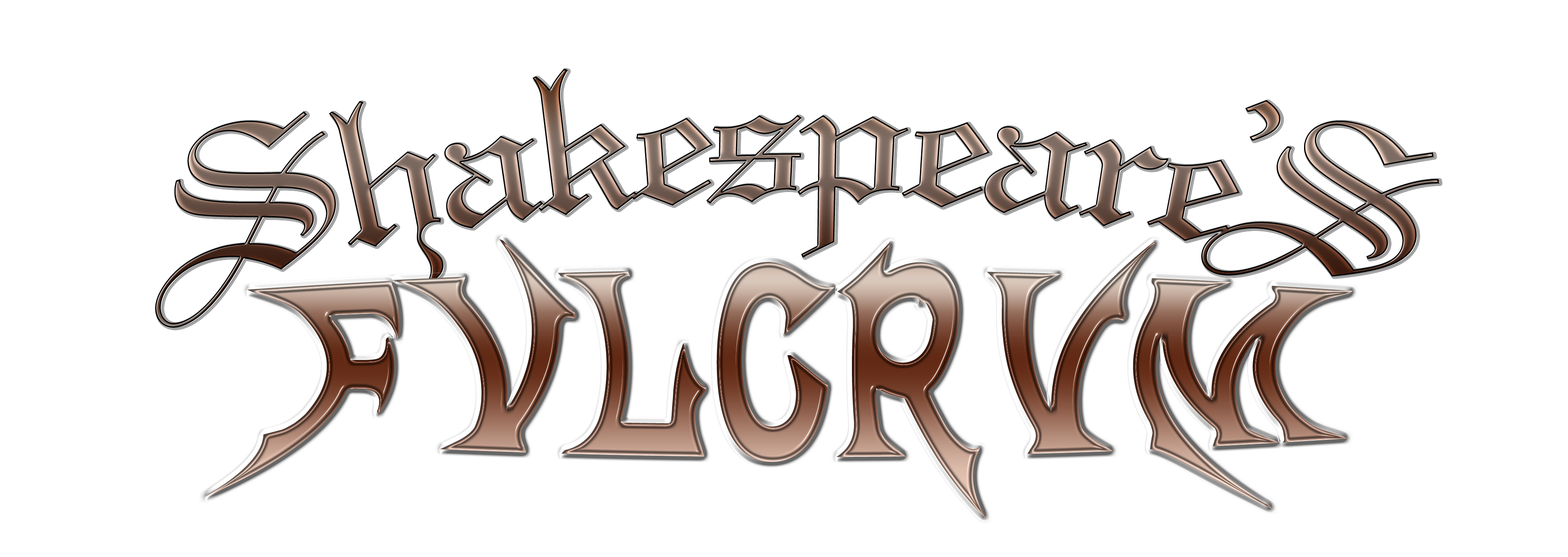
<style>
.page{position:relative;width:1568px;height:557px;background:#ffffff}
.page>*{position:absolute;margin:0}
.t1{font:217.8px "WeddingTextBT-Regular";letter-spacing:-0.025em}
.t2{font:217.8px "WeddingTextBT-Regular";letter-spacing:-0.09em}
.t3{font:243.7px "Mephisto";letter-spacing:-0.025em;scale:1.21 1}
</style>
<div class="page">
<p class="t1" style="left:155px;top:68px;width:1284px;height:260px">Shakespear<span class="t2">e’S</span></p>
<p class="t3" style="left:203px;top:239px;width:1150px;height:279px">FVLCRVM</p>
</div>
